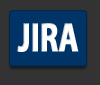
<style>
.page{position:relative;width:100px;height:85px;background:#333333}
.page>*{position:absolute;margin:0}
.t1{font:41px "MyriadPro-Bold";letter-spacing:-0.015em;color:#ffffff;font-weight:bold;scale:0.74 1}
</style>
<div class="page">
<p class="t1" style="left:17px;top:23px;width:62px;height:29px">JIRA</p>
</div>
